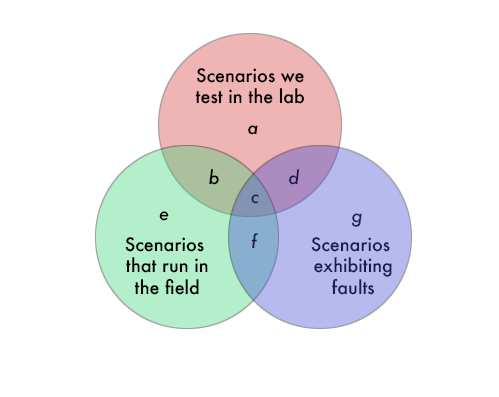
<style>
.page{position:relative;width:499px;height:397px;background:#ffffff}
.page>*{position:absolute;margin:0}
.t1{font:18px "Futura-Medium";color:#000000}
.t2{font:18px "Futura-MediumItalic";color:#000000}
.t3{font:18px "Futura-MediumItalic";color:#1a1e52}
.t4{font:18px "Futura-Medium";color:#1a1e52}
</style>
<div class="page">
<p class="t1" style="left:195px;top:68px;width:110px;height:36px;text-align:center">Scenarios we<br>test in the lab</p>
<p class="t2" style="left:248px;top:125px;width:10px;height:10px">a</p>
<p class="t2" style="left:209px;top:169px;width:10px;height:16px">b</p>
<p class="t3" style="left:288px;top:169px;width:12px;height:16px">d</p>
<p class="t3" style="left:251px;top:194px;width:8px;height:10px">c</p>
<p class="t2" style="left:159px;top:211px;width:10px;height:10px">e</p>
<p class="t3" style="left:351px;top:213px;width:11px;height:14px">g</p>
<p class="t3" style="left:251px;top:233px;width:7px;height:16px">f</p>
<p class="t1" style="left:125px;top:237px;width:83px;height:58px;text-align:center">Scenarios <br>that run in<br>the field</p>
<p class="t4" style="left:311px;top:237px;width:81px;height:58px;text-align:center">Scenarios <br>exhibiting<br>faults</p>
</div>
